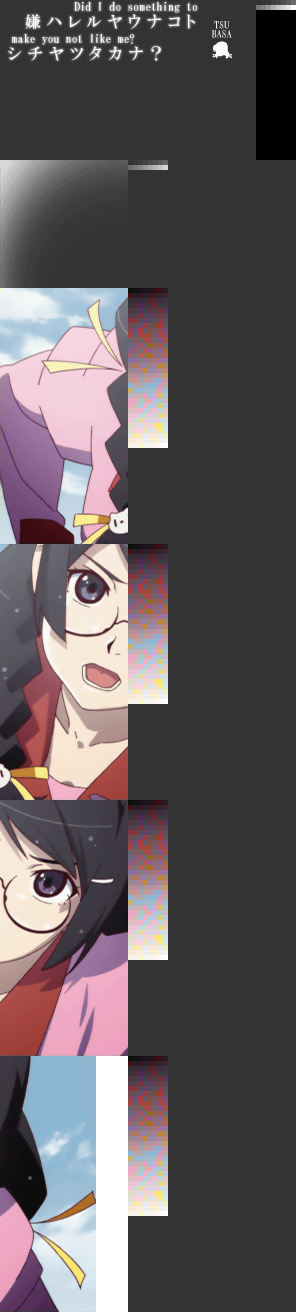
<style>
.page{position:relative;width:296px;height:1312px;background:#333333}
.page>*{position:absolute;margin:0}
.t1{font:12px/32px "HGMinchoB";color:#ffffff}
.t2{font:16px/32px "HGMinchoB";letter-spacing:0.35em;color:#ffffff}
.t3{font:16px/32px "HGMinchoB";letter-spacing:0.65em;color:#ffffff}
.t4{font:16px/32px "HGMinchoB";letter-spacing:0.3em;color:#ffffff}
.t5{font:16px/32px "HGMinchoB";letter-spacing:0.2em;color:#ffffff}
.t6{font:10px/9px "HGMinchoB";color:#ffffff}
</style>
<div class="page">
<p class="t1" style="left:11px;top:1px;width:186px;height:44px">Did I do something to<br> make you not like me?</p>
<p class="t2" style="left:8px;top:14px;width:187px;height:47px"><span class="t3"> </span>嫌ハレル<span class="t4">ヤウ</span>ナ<span class="t5">コ</span>ト <br>シチヤツタカナ？</p>
<p class="t6" style="left:212px;top:21px;width:20px;height:17px;text-align:center">TSU<br>BASA</p>
</div>
